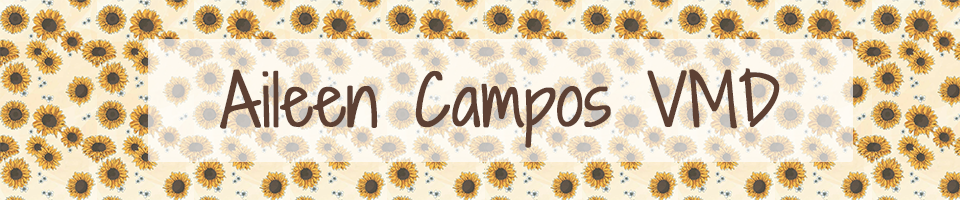
<style>
.page{position:relative;width:960px;height:200px}
.page>*{position:absolute;margin:0}
.t1{font:66.7px "ShadowsIntoLightTwo-Regular";color:#5d4033;font-weight:bold}
</style>
<div class="page">
<p class="t1" style="left:220px;top:68px;width:560px;height:80px">Aileen Campos VMD</p>
</div>
